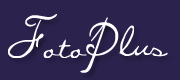
<style>
.page{position:relative;width:180px;height:80px;background:#2b224d}
.page>*{position:absolute;margin:0}
.t1{font:50px "MissBrooks";color:#ffffff}
</style>
<div class="page">
<p class="t1" style="left:8px;top:14px;width:111px;height:59px">FotoP</p>
<p class="t1" style="left:119px;top:25px;width:49px;height:32px">lus</p>
</div>
